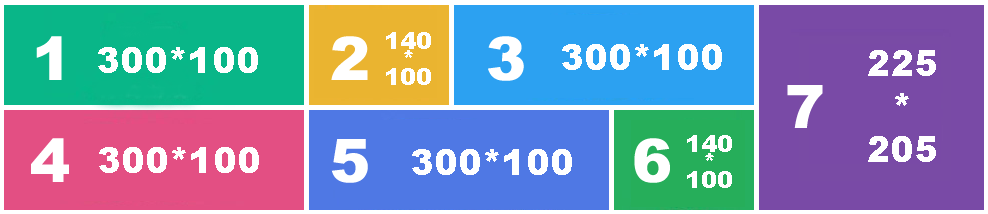
<style>
.page{position:relative;width:988px;height:214px}
.page>*{position:absolute;margin:0}
.t1{font:60px "Arial-Black";color:#ffffff}
.t2{font:24px/18px "Arial-Black";color:#ffffff}
.t3{font:36px "Arial-Black";color:#ffffff}
</style>
<div class="page">
<p class="t1" style="left:36px;top:36px;width:26px;height:44px">1</p>
<p class="t1" style="left:331px;top:36px;width:37px;height:44px">2</p>
<p class="t2" style="left:386px;top:32px;width:45px;height:53px;text-align:center">140<br>*<br>100</p>
<p class="t1" style="left:488px;top:36px;width:36px;height:45px">3</p>
<p class="t3" style="left:98px;top:47px;width:160px;height:26px">300*100</p>
<p class="t3" style="left:562px;top:44px;width:160px;height:26px">300*100</p>
<p class="t3" style="left:868px;top:50px;width:68px;height:112px;text-align:center">225<br>*<br>205</p>
<p class="t1" style="left:787px;top:85px;width:36px;height:43px">7</p>
<p class="t2" style="left:687px;top:135px;width:45px;height:53px;text-align:center">140<br>*<br>100</p>
<p class="t1" style="left:31px;top:138px;width:38px;height:44px">4</p>
<p class="t3" style="left:99px;top:147px;width:160px;height:26px">300*100</p>
<p class="t1" style="left:331px;top:139px;width:37px;height:44px">5</p>
<p class="t3" style="left:412px;top:149px;width:160px;height:26px">300*100</p>
<p class="t1" style="left:634px;top:138px;width:36px;height:45px">6</p>
</div>
